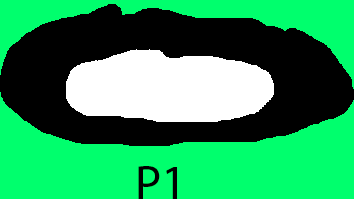
<style>
.page{position:relative;width:354px;height:199px;background:#00ff6d}
.page>*{position:absolute;margin:0}
.t1{font:12px "MyriadHebrew-Regular";color:#000000}
</style>
<div class="page">
<p class="t1" style="left:138px;top:166px;width:39px;height:34px">P1</p>
</div>
